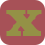
<style>
.page{position:relative;width:45px;height:45px;background:#a75157}
.page>*{position:absolute;margin:0}
.t1{font:50px "Saddlebag-Black";color:#949146}
</style>
<div class="page">
<p class="t1" style="left:6px;top:10px;width:36px;height:26px">X</p>
</div>
